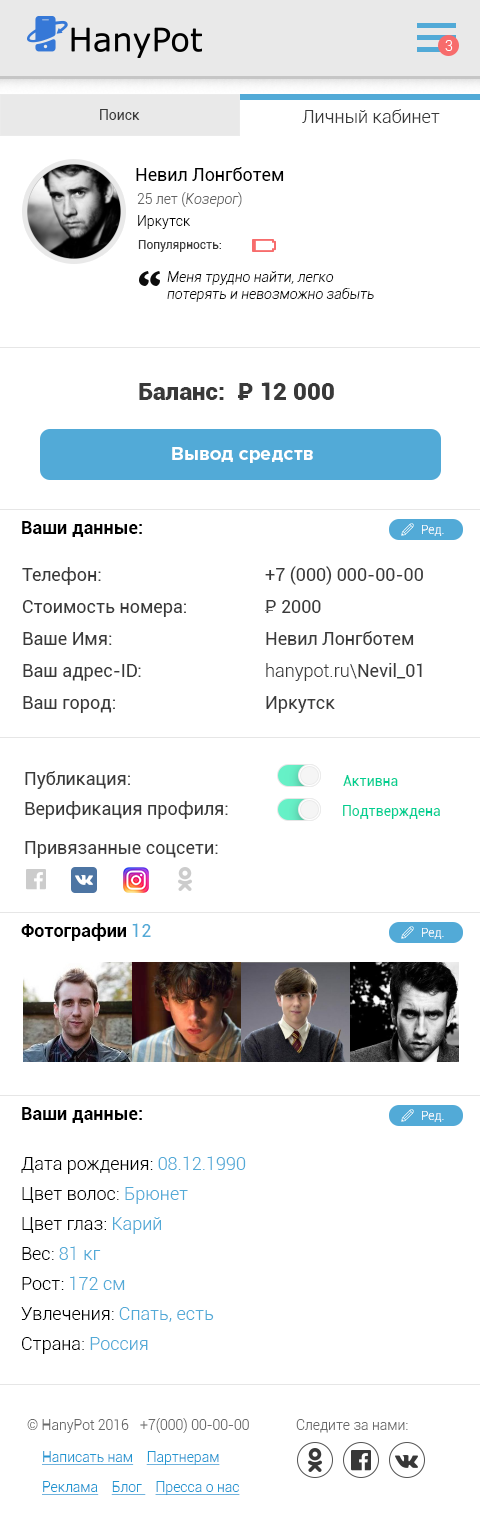
<style>
.page{position:relative;width:480px;height:1532px;background:#ffffff}
.page>*{position:absolute;margin:0}
.t1{font:14px "Roboto-Light";color:#ffffff}
.t2{font:14px "Roboto-Regular";color:#393939}
.t3{font:18px "Roboto-Light";color:#393939}
.t4{font:18px "Roboto-Regular";color:#000000}
.t5{font:14px "Roboto-Light";color:#636363}
.t6{font:14px "Roboto-LightItalic";color:#636363}
.t7{font:14px "Roboto-Light";color:#000000}
.t8{font:12px "Roboto-Regular";color:#393939}
.t9{font:14px "Roboto-LightItalic";color:#0c0c0c}
.t10{font:24px "Roboto-Black";color:#393939}
.t11{font:18px "GothamPro-Bold";color:#ffffff}
.t12{font:18px "Roboto-Bold";color:#000000}
.t13{font:12px "Roboto-Light";color:#ffffff}
.t14{font:18px/32px "Roboto-Regular";color:#393939}
.t15{font:18px/32px "Roboto-Regular";color:#3a3a3a}
.t16{font:18px/32px "Roboto-Light";color:#3a3a3a}
.t17{font:18px "Roboto-Regular";color:#393939}
.t18{font:14px "Roboto-Regular";color:#01cf91}
.t19{font:18px "Roboto-Regular";color:#52aad7}
.t20{font:18px/30px "Roboto-Light";color:#000000}
.t21{font:18px/30px "Roboto-Light";color:#52aad7}
.t22{font:14px "Roboto-Light";color:#696969}
.t23{font:14px/30px "Roboto-Light";color:#2196d1;text-decoration:underline}
.t24{font:14px "Roboto-Light";color:#2196d1;text-decoration:underline}
</style>
<div class="page">
<p class="t1" style="left:445px;top:40px;width:8px;height:11px">3</p>
<p class="t2" style="left:100px;top:109px;width:40px;height:11px">Поиск</p>
<p class="t3" style="left:302px;top:109px;width:138px;height:14px">Личный кабинет</p>
<p class="t4" style="left:136px;top:167px;width:148px;height:14px">Невил Лонгботем</p>
<p class="t5" style="left:137px;top:192px;width:105px;height:15px">25 лет (<span class="t6">Козерог</span>)</p>
<p class="t7" style="left:138px;top:215px;width:52px;height:14px">Иркутск</p>
<p class="t8" style="left:138px;top:240px;width:83px;height:12px">Популярность:</p>
<p class="t9" style="left:167px;top:271px;width:207px;height:31px">Меня трудно найти, легко <br>потерять и невозможно забыть</p>
<p class="t10" style="left:139px;top:383px;width:85px;height:17px">Баланс:</p>
<p class="t10" style="left:239px;top:382px;width:95px;height:18px">Р 12 000</p>
<p class="t11" style="left:172px;top:447px;width:141px;height:16px">Вывод средств</p>
<p class="t12" style="left:22px;top:521px;width:120px;height:16px">Ваши данные:</p>
<p class="t13" style="left:422px;top:525px;width:22px;height:11px">Ред.</p>
<p class="t14" style="left:22px;top:567px;width:164px;height:146px">Телефон:<br>Стоимость номера:<br>Ваше Имя:<br>Ваш адрес-ID:<br>Ваш город:</p>
<p class="t15" style="left:265px;top:566px;width:158px;height:147px">+7 (000) 000-00-00<br>Р 2000<br>Невил Лонгботем<br><span class="t16">hanypot.ru\</span>Nevil_01<br>Иркутск</p>
<p class="t17" style="left:25px;top:771px;width:105px;height:18px">Публикация:</p>
<p class="t18" style="left:343px;top:775px;width:55px;height:11px">Активна</p>
<p class="t17" style="left:25px;top:801px;width:203px;height:18px">Верификация профиля:</p>
<p class="t18" style="left:343px;top:805px;width:97px;height:14px">Подтверждена</p>
<p class="t17" style="left:25px;top:841px;width:193px;height:17px">Привязанные соцсети:</p>
<p class="t12" style="left:21px;top:923px;width:105px;height:18px">Фотографии</p>
<p class="t19" style="left:132px;top:923px;width:19px;height:14px">12</p>
<p class="t13" style="left:422px;top:928px;width:22px;height:11px">Ред.</p>
<p class="t12" style="left:22px;top:1107px;width:120px;height:16px">Ваши данные:</p>
<p class="t13" style="left:422px;top:1111px;width:22px;height:11px">Ред.</p>
<p class="t20" style="left:21px;top:1156px;width:225px;height:198px">Дата рождения: <span class="t21">08.12.1990<br></span>Цвет волос: <span class="t21">Брюнет<br></span>Цвет глаз: <span class="t21">Карий<br></span>Вес: <span class="t21">81 кг<br></span>Рост: <span class="t21">172 см<br></span>Увлечения: <span class="t21">Спать, есть<br></span>Страна:<span class="t21"> Россия</span></p>
<p class="t22" style="left:27px;top:1419px;width:102px;height:14px">© HanyPot 2016</p>
<p class="t22" style="left:140px;top:1418px;width:109px;height:15px">+7(000) 00-00-00</p>
<p class="t22" style="left:296px;top:1419px;width:112px;height:14px">Следите за нами:</p>
<p class="t23" style="left:42px;top:1451px;width:198px;height:44px"><span class="t24">Написать нам    </span>Партнерам    <br>Реклама    Блог    Пресса о нас</p>
</div>
